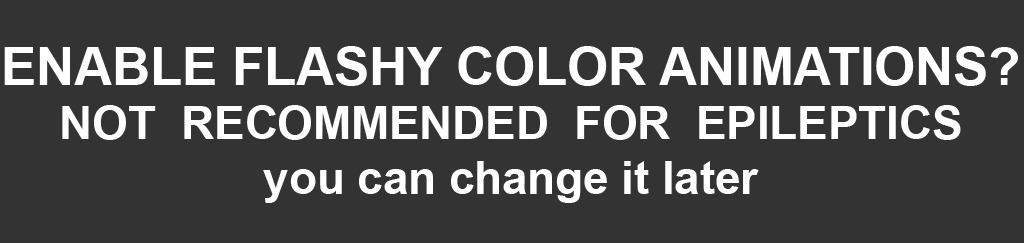
<style>
.page{position:relative;width:1024px;height:243px;background:#333333}
.page>*{position:absolute;margin:0}
.t1{font:45.6px "Arial-BoldMT";color:#ffffff}
.t2{font:52.6px "Arial-BoldMT";color:#ffffff}
</style>
<div class="page">
<p class="t1" style="left:4px;top:46px;width:1014px;height:157px;text-align:center"><span class="t2">ENABLE FLASHY COLOR ANIMATIONS?<br></span>NOT  RECOMMENDED  FOR  EPILEPTICS<br>you can change it later</p>
</div>
